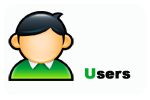
<style>
.page{position:relative;width:150px;height:100px;background:#fafdfb}
.page>*{position:absolute;margin:0}
.t1{font:14px "Arial-Black";color:#080808;font-weight:bold}
.t2{font:14px "Arial-Black";color:#03ab24;font-weight:bold}
</style>
<div class="page">
<p class="t1" style="left:85px;top:68px;width:46px;height:11px"><span class="t2">U</span>sers</p>
</div>
